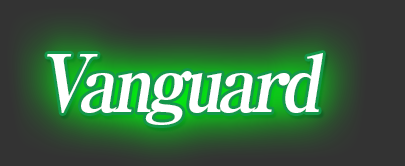
<style>
.page{position:relative;width:405px;height:166px;background:#333333}
.page>*{position:absolute;margin:0}
.t1{font:80px "RyuminPro-ExBold";letter-spacing:-0.08em;color:#ffffff;font-style:italic;scale:0.9 1}
</style>
<div class="page">
<p class="t1" style="left:47px;top:53px;width:276px;height:72px">Vanguard</p>
</div>
